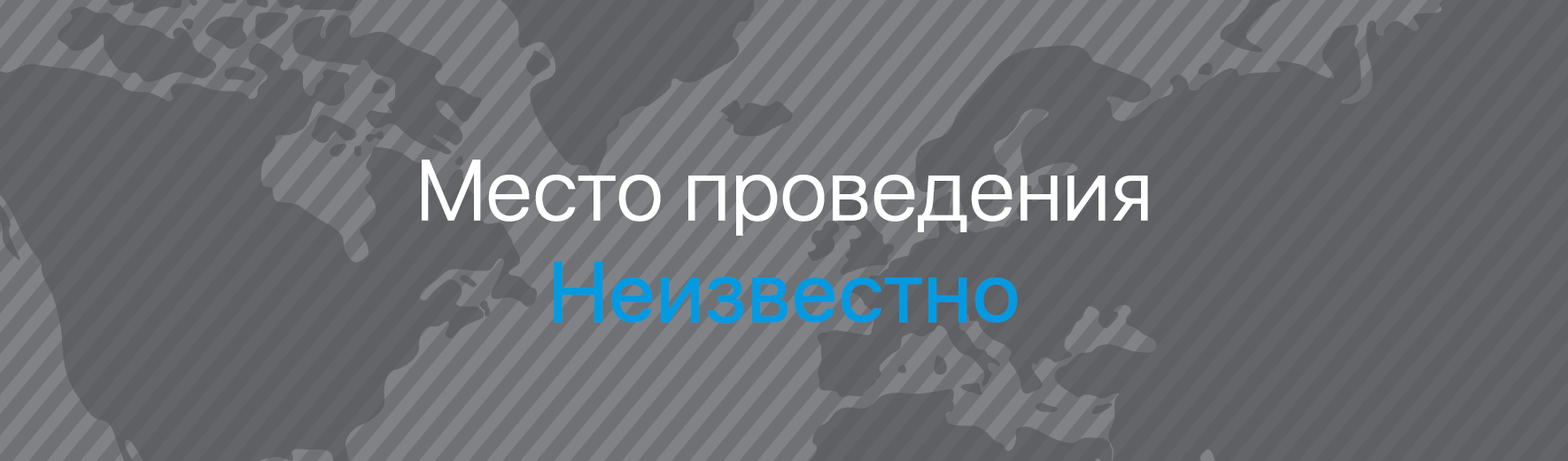
<style>
.page{position:relative;width:1568px;height:461px;background:#5f6063}
.page>*{position:absolute;margin:0}
.t1{font:84.9px "SFUIDisplay-Light";color:#ffffff;font-weight:bold}
.t2{font:84.9px "SFUIDisplay-Regular";color:#039ae1;font-weight:bold}
</style>
<div class="page">
<p class="t1" style="left:422px;top:159px;width:726px;height:164px;text-align:center">Место проведения<br><span class="t2">Неизвестно</span></p>
</div>
